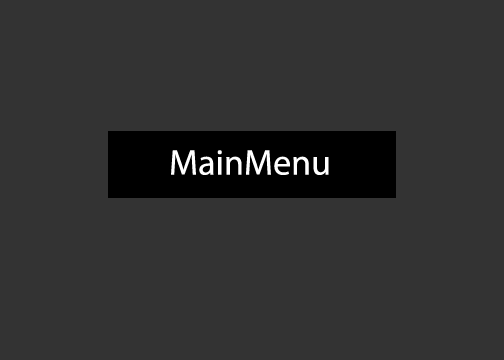
<style>
.page{position:relative;width:504px;height:360px;background:#333333}
.page>*{position:absolute;margin:0}
.t1{font:36px "MyriadPro-Regular";color:#ffffff}
</style>
<div class="page">
<p class="t1" style="left:171px;top:150px;width:158px;height:25px">MainMenu</p>
</div>
